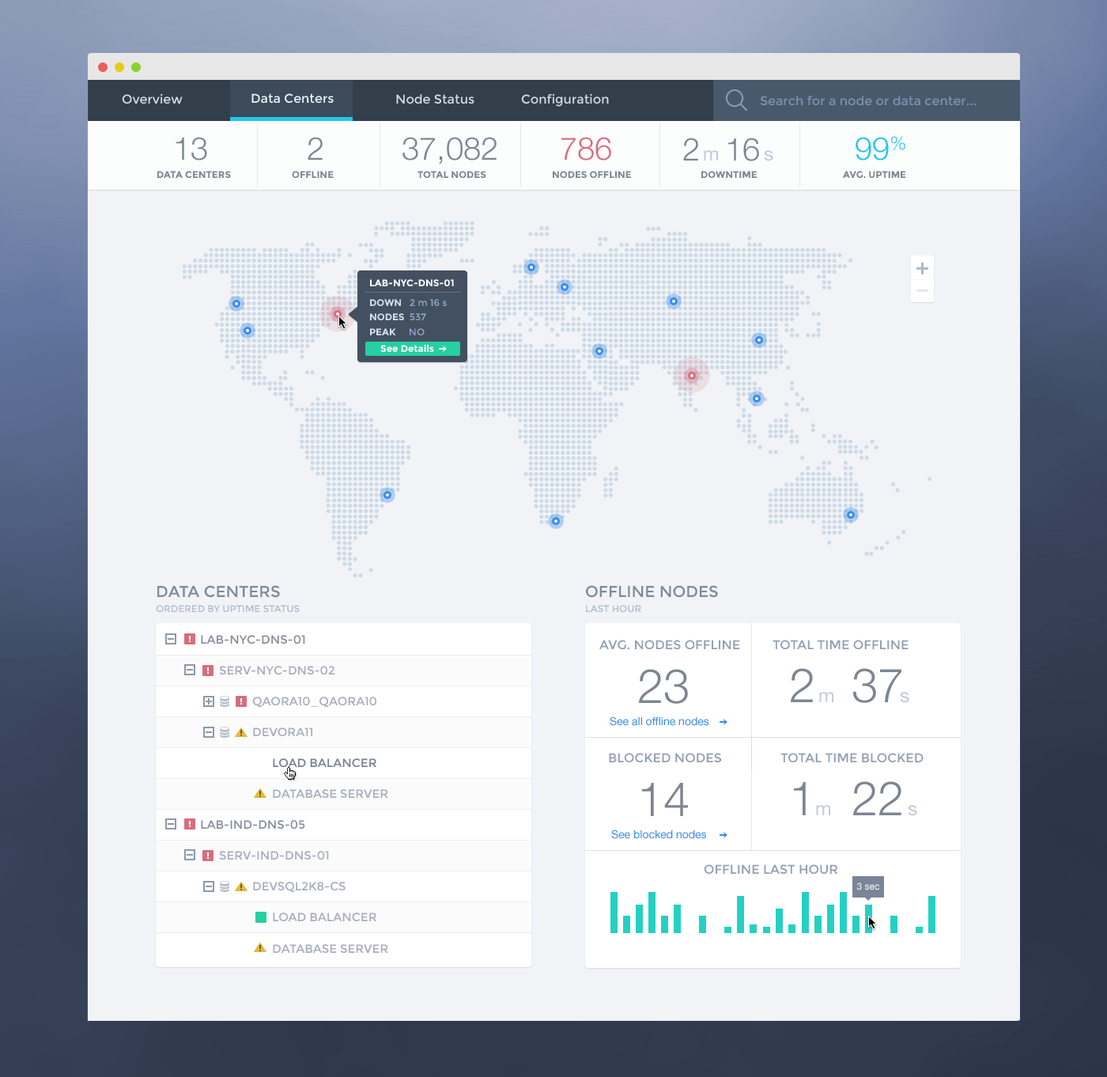
<style>
.page{position:relative;width:1107px;height:1077px;background:#f1f3f6}
.page>*{position:absolute;margin:0}
.t1{font:12.7px "Montserrat-Regular";color:#cedee2}
.t2{font:12.7px "Montserrat-Regular";color:#e7f5f8}
.t3{font:12.7px "Montserrat-Regular";color:#7891ae}
.t4{font:31.6px "HelveticaNeue-Light";color:#7c8692}
.t5{font:31.6px "HelveticaNeue-Light";color:#d66e7e}
.t6{font:31.6px "HelveticaNeue-Light";color:#7c8692;text-transform:uppercase}
.t7{font:31.6px "HelveticaNeue-Light";color:#22c6ef}
.t8{font:19px "HelveticaNeue";color:#c0cbd8}
.t9{font:9.5px "Montserrat-Bold";color:#7c8692;text-transform:uppercase}
.t10{font:9.5px "Montserrat-Bold";color:#ffffff;text-transform:uppercase}
.t11{font:9.5px "Montserrat-Bold";color:#d1dfef;text-transform:uppercase}
.t12{font:9.5px "Montserrat-Regular";color:#90accd;text-transform:uppercase}
.t13{font:9.5px "Montserrat-Regular";color:#90accd}
.t14{font:9.5px "Montserrat-Bold";color:#ffffff}
.t15{font:15.8px "Montserrat-Regular";color:#7e8b9a;text-transform:uppercase}
.t16{font:9.5px "Montserrat-Regular";color:#aebccd;text-transform:uppercase}
.t17{font:11.8px "Montserrat-Regular";color:#878e9b;text-transform:uppercase}
.t18{font:12.7px "Montserrat-Regular";color:#91a0b3;text-transform:uppercase}
.t19{font:11.8px "Montserrat-Regular";color:#a7aebc;text-transform:uppercase}
.t20{font:47.4px "HelveticaNeue-Light";color:#7c8692;text-transform:uppercase}
.t21{font:11.1px "HelveticaNeue";color:#3b8ceb}
.t22{font:11.8px "Montserrat-Regular";color:#768094;text-transform:uppercase}
.t23{font:9.5px "HelveticaNeue";color:#ffffff}
</style>
<div class="page">
<p class="t1" style="left:122px;top:93px;width:61px;height:11px">Overview</p>
<p class="t2" style="left:251px;top:93px;width:83px;height:11px">Data Centers</p>
<p class="t1" style="left:396px;top:94px;width:78px;height:10px">Node Status</p>
<p class="t1" style="left:521px;top:93px;width:88px;height:14px">Configuration</p>
<p class="t3" style="left:760px;top:96px;width:217px;height:10px">Search for a node or data center...</p>
<p class="t4" style="left:176px;top:137px;width:31px;height:24px">13</p>
<p class="t4" style="left:308px;top:137px;width:15px;height:23px">2</p>
<p class="t4" style="left:403px;top:137px;width:94px;height:27px">37,082</p>
<p class="t5" style="left:561px;top:137px;width:50px;height:24px">786</p>
<p class="t6" style="left:683px;top:138px;width:15px;height:23px">2</p>
<p class="t6" style="left:728px;top:138px;width:31px;height:23px">16</p>
<p class="t7" style="left:856px;top:136px;width:49px;height:25px">99%</p>
<p class="t8" style="left:704px;top:150px;width:14px;height:11px">m</p>
<p class="t8" style="left:764px;top:150px;width:9px;height:11px">s</p>
<p class="t9" style="left:157px;top:171px;width:74px;height:7px">data centers</p>
<p class="t9" style="left:292px;top:171px;width:42px;height:7px">offline</p>
<p class="t9" style="left:418px;top:171px;width:68px;height:7px">total nodes</p>
<p class="t9" style="left:553px;top:171px;width:78px;height:7px">nodes offline</p>
<p class="t9" style="left:701px;top:171px;width:56px;height:7px">downtime</p>
<p class="t9" style="left:843px;top:171px;width:63px;height:7px">avg. uptime</p>
<p class="t10" style="left:370px;top:279px;width:84px;height:7px">lab-nyc-dns-01</p>
<p class="t11" style="left:370px;top:299px;width:77px;height:7px">down<span class="t12">   2 </span><span class="t13">m</span><span class="t12"> 16 </span><span class="t13">s</span></p>
<p class="t11" style="left:370px;top:313px;width:56px;height:7px">nodes<span class="t12">  537</span></p>
<p class="t11" style="left:370px;top:328px;width:55px;height:7px">peak<span class="t12">     no</span></p>
<p class="t14" style="left:380px;top:345px;width:54px;height:7px">See Details</p>
<p class="t15" style="left:157px;top:585px;width:123px;height:13px">data centers</p>
<p class="t15" style="left:586px;top:585px;width:132px;height:13px">offline nodes</p>
<p class="t16" style="left:156px;top:605px;width:144px;height:7px">ordered by uptime status</p>
<p class="t16" style="left:586px;top:605px;width:55px;height:7px">last hour</p>
<p class="t17" style="left:201px;top:635px;width:104px;height:9px">lab-nyc-dns-01</p>
<p class="t18" style="left:599px;top:640px;width:141px;height:10px">avg. nodes offline</p>
<p class="t18" style="left:773px;top:640px;width:136px;height:9px">total time offline</p>
<p class="t19" style="left:219px;top:666px;width:116px;height:9px">serv-nyc-dns-02</p>
<p class="t20" style="left:639px;top:669px;width:49px;height:35px">23</p>
<p class="t20" style="left:791px;top:668px;width:22px;height:34px">2</p>
<p class="t20" style="left:853px;top:668px;width:49px;height:35px">37</p>
<p class="t19" style="left:252px;top:697px;width:124px;height:10px">QAORA10_QAora10</p>
<p class="t8" style="left:819px;top:692px;width:14px;height:10px">m</p>
<p class="t8" style="left:900px;top:692px;width:9px;height:11px">s</p>
<p class="t21" style="left:610px;top:716px;width:99px;height:10px">See all offline nodes</p>
<p class="t19" style="left:253px;top:728px;width:59px;height:8px">DEVORA11</p>
<p class="t22" style="left:273px;top:758px;width:103px;height:9px">load balancer</p>
<p class="t18" style="left:609px;top:753px;width:112px;height:10px">blocked nodes</p>
<p class="t18" style="left:781px;top:753px;width:143px;height:10px">total time blocked</p>
<p class="t20" style="left:642px;top:783px;width:46px;height:33px">14</p>
<p class="t20" style="left:794px;top:782px;width:12px;height:33px">1</p>
<p class="t20" style="left:853px;top:781px;width:49px;height:34px">22</p>
<p class="t19" style="left:273px;top:789px;width:115px;height:9px">database server</p>
<p class="t8" style="left:816px;top:805px;width:14px;height:10px">m</p>
<p class="t8" style="left:908px;top:805px;width:9px;height:11px">s</p>
<p class="t17" style="left:201px;top:820px;width:104px;height:9px">lab-ind-dns-05</p>
<p class="t21" style="left:611px;top:830px;width:95px;height:9px">See blocked nodes</p>
<p class="t19" style="left:219px;top:851px;width:110px;height:9px">serv-ind-dns-01</p>
<p class="t18" style="left:704px;top:864px;width:134px;height:11px">offline last hour</p>
<p class="t19" style="left:253px;top:882px;width:93px;height:10px">devsql2k8-cs</p>
<p class="t23" style="left:856px;top:883px;width:23px;height:7px">3 sec</p>
<p class="t19" style="left:273px;top:913px;width:103px;height:8px">load balancer</p>
<p class="t19" style="left:273px;top:944px;width:115px;height:9px">database server</p>
</div>
